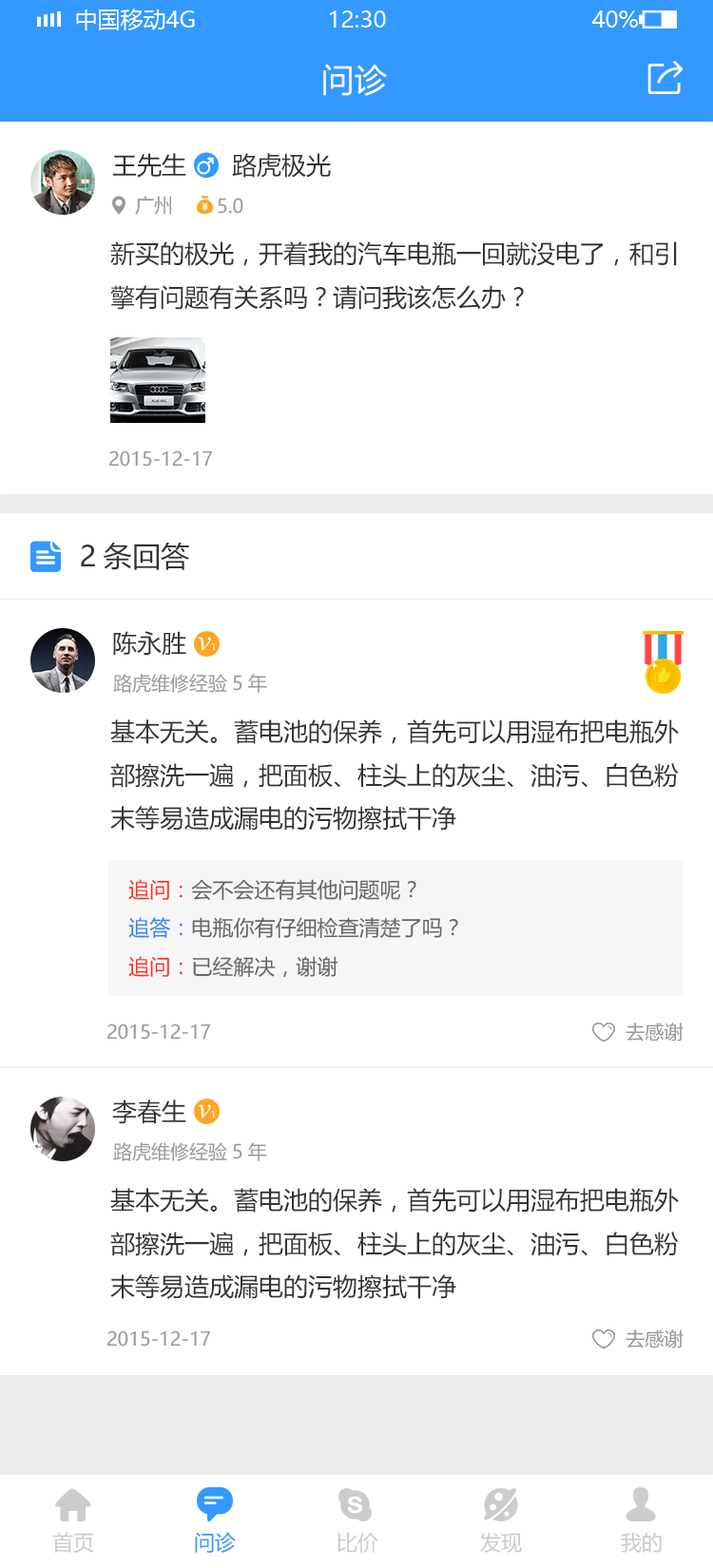
<style>
.page{position:relative;width:713px;height:1568px;background:#ffffff}
.page>*{position:absolute;margin:0}
.t1{font:32.3px "MicrosoftYaHei";color:#ffffff}
.t2{font:24.7px "MicrosoftYaHei";color:#333333}
.t3{font:19px "MicrosoftYaHei";color:#999999}
.t4{font:28.5px "MicrosoftYaHei";color:#333333}
.t5{font:20.9px "MicrosoftYaHei";color:#666666}
.t6{font:20.9px "MicrosoftYaHei";color:#ff2e24}
.t7{font:20.9px "MicrosoftYaHei";color:#2e82ff}
.t8{font:20.9px "MicrosoftYaHei";color:#cccccc}
.t9{font:20.9px "MicrosoftYaHei";color:#3399ff}
</style>
<div class="page">
<p class="t1" style="left:323px;top:64px;width:64px;height:32px">问诊</p>
<p class="t2" style="left:112px;top:153px;width:74px;height:25px">王先生</p>
<p class="t2" style="left:112px;top:153px;width:74px;height:25px">王先生</p>
<p class="t2" style="left:232px;top:153px;width:99px;height:25px">路虎极光</p>
<p class="t2" style="left:232px;top:153px;width:99px;height:25px">路虎极光</p>
<p class="t3" style="left:135px;top:196px;width:37px;height:19px">广州</p>
<p class="t3" style="left:135px;top:196px;width:37px;height:19px">广州</p>
<p class="t3" style="left:218px;top:198px;width:25px;height:16px">5.0</p>
<p class="t3" style="left:218px;top:198px;width:25px;height:16px">5.0</p>
<p class="t2" style="left:110px;top:241px;width:567px;height:69px">新买的极光，开着我的汽车电瓶一回就没电了，和引<br>擎有问题有关系吗？请问我该怎么办？</p>
<p class="t2" style="left:110px;top:241px;width:567px;height:69px">新买的极光，开着我的汽车电瓶一回就没电了，和引<br>擎有问题有关系吗？请问我该怎么办？</p>
<p class="t3" style="left:109px;top:450px;width:104px;height:17px">2015-12-17</p>
<p class="t3" style="left:109px;top:450px;width:104px;height:17px">2015-12-17</p>
<p class="t4" style="left:81px;top:543px;width:108px;height:27px">2条回答</p>
<p class="t2" style="left:113px;top:631px;width:73px;height:25px">陈永胜</p>
<p class="t2" style="left:113px;top:631px;width:73px;height:25px">陈永胜</p>
<p class="t3" style="left:113px;top:674px;width:154px;height:19px">路虎维修经验5年</p>
<p class="t3" style="left:113px;top:674px;width:154px;height:19px">路虎维修经验5年</p>
<p class="t2" style="left:110px;top:719px;width:569px;height:112px">基本无关。蓄电池的保养，首先可以用湿布把电瓶外<br>部擦洗一遍，把面板、柱头上的灰尘、油污、白色粉<br>末等易造成漏电的污物擦拭干净</p>
<p class="t2" style="left:110px;top:719px;width:569px;height:112px">基本无关。蓄电池的保养，首先可以用湿布把电瓶外<br>部擦洗一遍，把面板、柱头上的灰尘、油污、白色粉<br>末等易造成漏电的污物擦拭干净</p>
<p class="t5" style="left:128px;top:879px;width:288px;height:22px"><span class="t6">追问：</span>会不会还有其他问题呢？</p>
<p class="t5" style="left:128px;top:879px;width:288px;height:22px"><span class="t6">追问：</span>会不会还有其他问题呢？</p>
<p class="t5" style="left:128px;top:917px;width:330px;height:22px"><span class="t7">追答：</span>电瓶你有仔细检查清楚了吗？</p>
<p class="t5" style="left:128px;top:917px;width:330px;height:22px"><span class="t7">追答：</span>电瓶你有仔细检查清楚了吗？</p>
<p class="t5" style="left:128px;top:956px;width:210px;height:22px"><span class="t6">追问：</span>已经解决，谢谢</p>
<p class="t5" style="left:128px;top:956px;width:210px;height:22px"><span class="t6">追问：</span>已经解决，谢谢</p>
<p class="t3" style="left:107px;top:1023px;width:104px;height:17px">2015-12-17</p>
<p class="t3" style="left:107px;top:1023px;width:104px;height:17px">2015-12-17</p>
<p class="t3" style="left:625px;top:1023px;width:58px;height:19px">去感谢</p>
<p class="t2" style="left:112px;top:1100px;width:74px;height:24px">李春生</p>
<p class="t3" style="left:113px;top:1142px;width:154px;height:19px">路虎维修经验5年</p>
<p class="t2" style="left:110px;top:1188px;width:569px;height:111px">基本无关。蓄电池的保养，首先可以用湿布把电瓶外<br>部擦洗一遍，把面板、柱头上的灰尘、油污、白色粉<br>末等易造成漏电的污物擦拭干净</p>
<p class="t3" style="left:107px;top:1330px;width:104px;height:17px">2015-12-17</p>
<p class="t3" style="left:625px;top:1329px;width:58px;height:19px">去感谢</p>
<p class="t8" style="left:52px;top:1532px;width:42px;height:21px">首页</p>
<p class="t9" style="left:195px;top:1532px;width:41px;height:21px">问诊</p>
<p class="t8" style="left:337px;top:1532px;width:41px;height:21px">比价</p>
<p class="t8" style="left:480px;top:1532px;width:42px;height:21px">发现</p>
<p class="t8" style="left:621px;top:1532px;width:40px;height:21px">我的</p>
</div>
